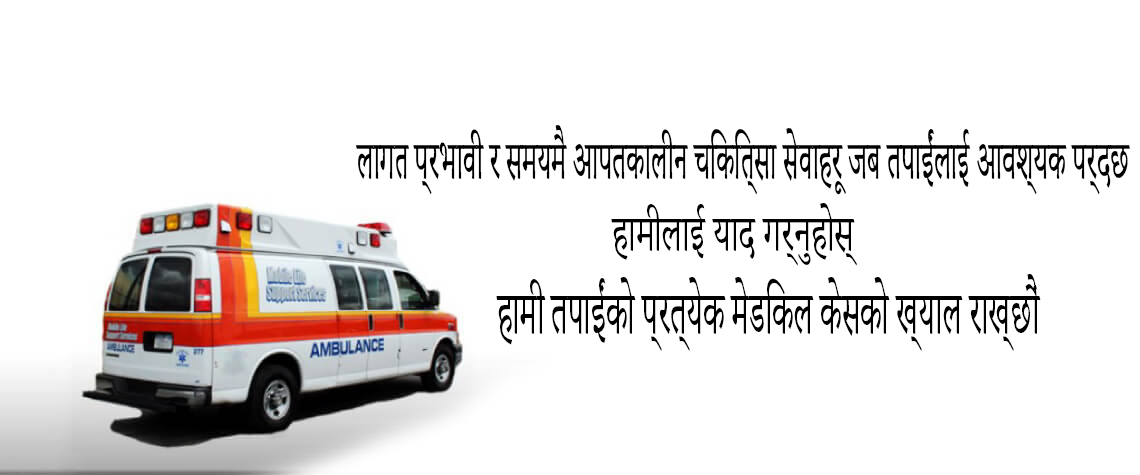
<style>
.page{position:relative;width:1140px;height:475px;background:#ffffff}
.page>*{position:absolute;margin:0}
.t1{font:68.6px "AdobeDevanagari-Regular";color:#000000;scale:0.46 1}
.t2{font:65px "AdobeDevanagari-Regular";color:#000000;scale:0.6 1}
.t3{font:76.9px "AdobeDevanagari-Regular";color:#000000;scale:0.48 1}
</style>
<div class="page">
<p class="t1" style="left:355px;top:125px;width:775px;height:70px">लागत प्रभावी र समयमै आपतकालीन चिकित्सा सेवाहरू जब तपाईंलाई आवश्यक पर्दछ</p>
<p class="t2" style="left:611px;top:203px;width:246px;height:63px">हामीलाई याद गर्नुहोस्</p>
<p class="t3" style="left:496px;top:274px;width:545px;height:77px">हामी तपाईंको प्रत्येक मेडिकल केसको ख्याल राख्छौं</p>
</div>
